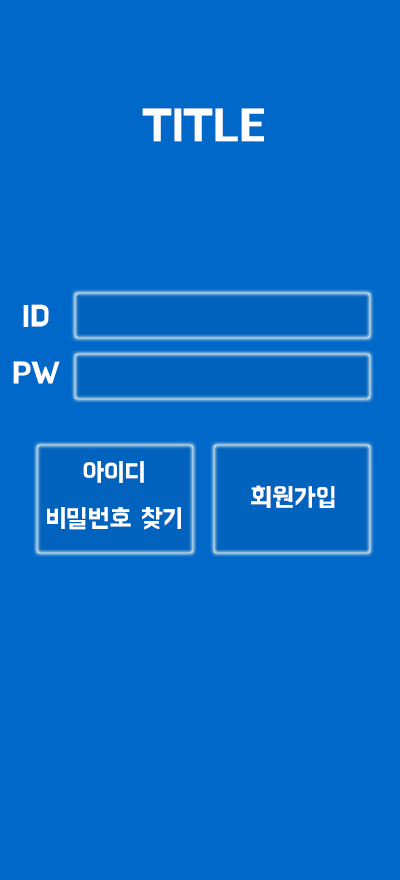
<style>
.page{position:relative;width:400px;height:880px;background:#0068c8}
.page>*{position:absolute;margin:0}
.t1{font:45px "BMHANNAPro";color:#ffffff}
.t2{font:30px "BMHANNA11yrsold";color:#ffffff}
.t3{font:30px "BMHANNAPro";color:#ffffff}
.t4{font:26px "BMHANNAPro";color:#ffffff}
</style>
<div class="page">
<p class="t1" style="left:142px;top:108px;width:122px;height:34px">TITLE</p>
<p class="t2" style="left:23px;top:304px;width:26px;height:23px">ID</p>
<p class="t3" style="left:13px;top:361px;width:47px;height:23px">PW</p>
<p class="t4" style="left:47px;top:461px;width:134px;height:69px;text-align:center">아이디<br>비밀번호 찾기</p>
<p class="t4" style="left:251px;top:485px;width:84px;height:23px">회원가입</p>
</div>
